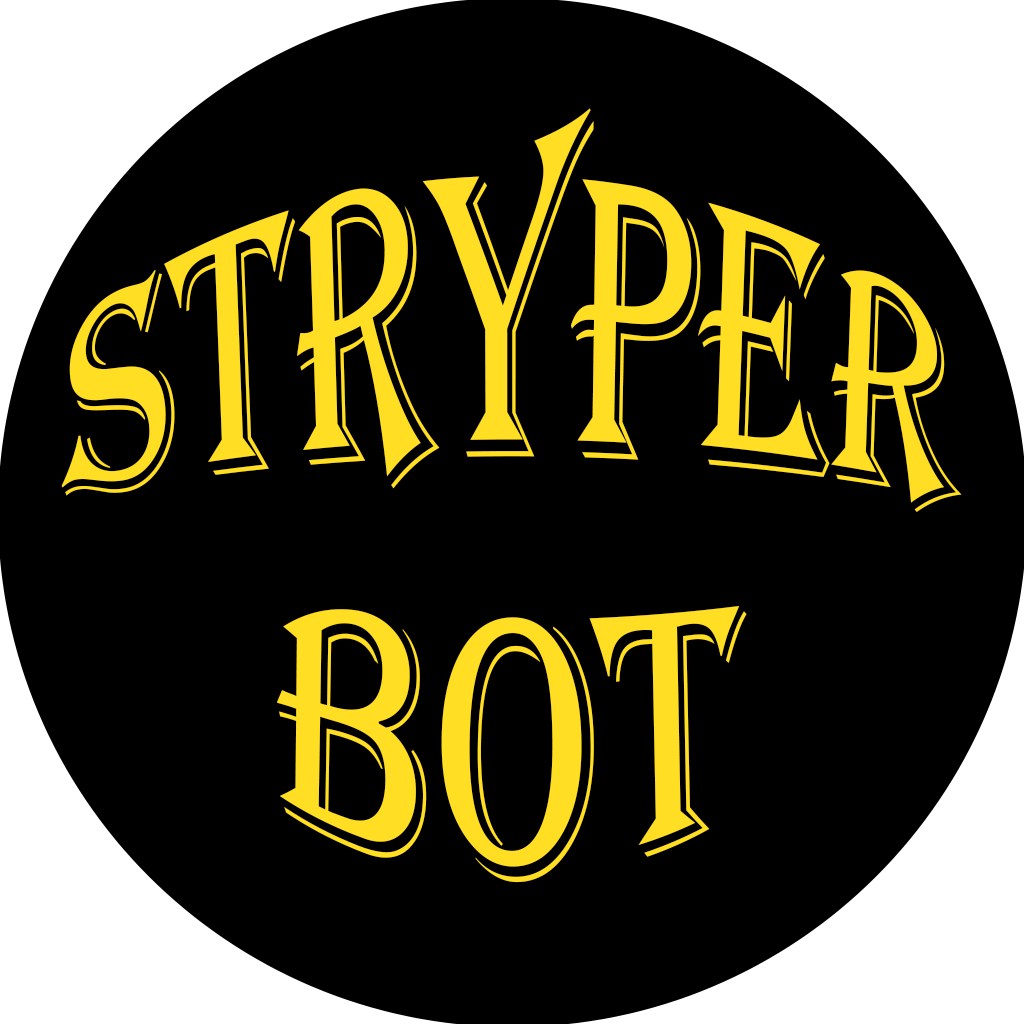
<style>
.page{position:relative;width:1024px;height:1024px;background:#000000}
.page>*{position:absolute;margin:0}
.t1{font:250px "Algerian";letter-spacing:-0.01em;color:#ffde24;text-transform:uppercase;scale:0.85 1}
.t2{font:300px "Algerian";letter-spacing:-0.01em;color:#ffde24;text-transform:uppercase;scale:0.85 1}
</style>
<div class="page">
<p class="t1" style="left:61px;top:108px;width:901px;height:404px">STRYPEr</p>
<p class="t2" style="left:276px;top:606px;width:471px;height:277px">BOT</p>
</div>
